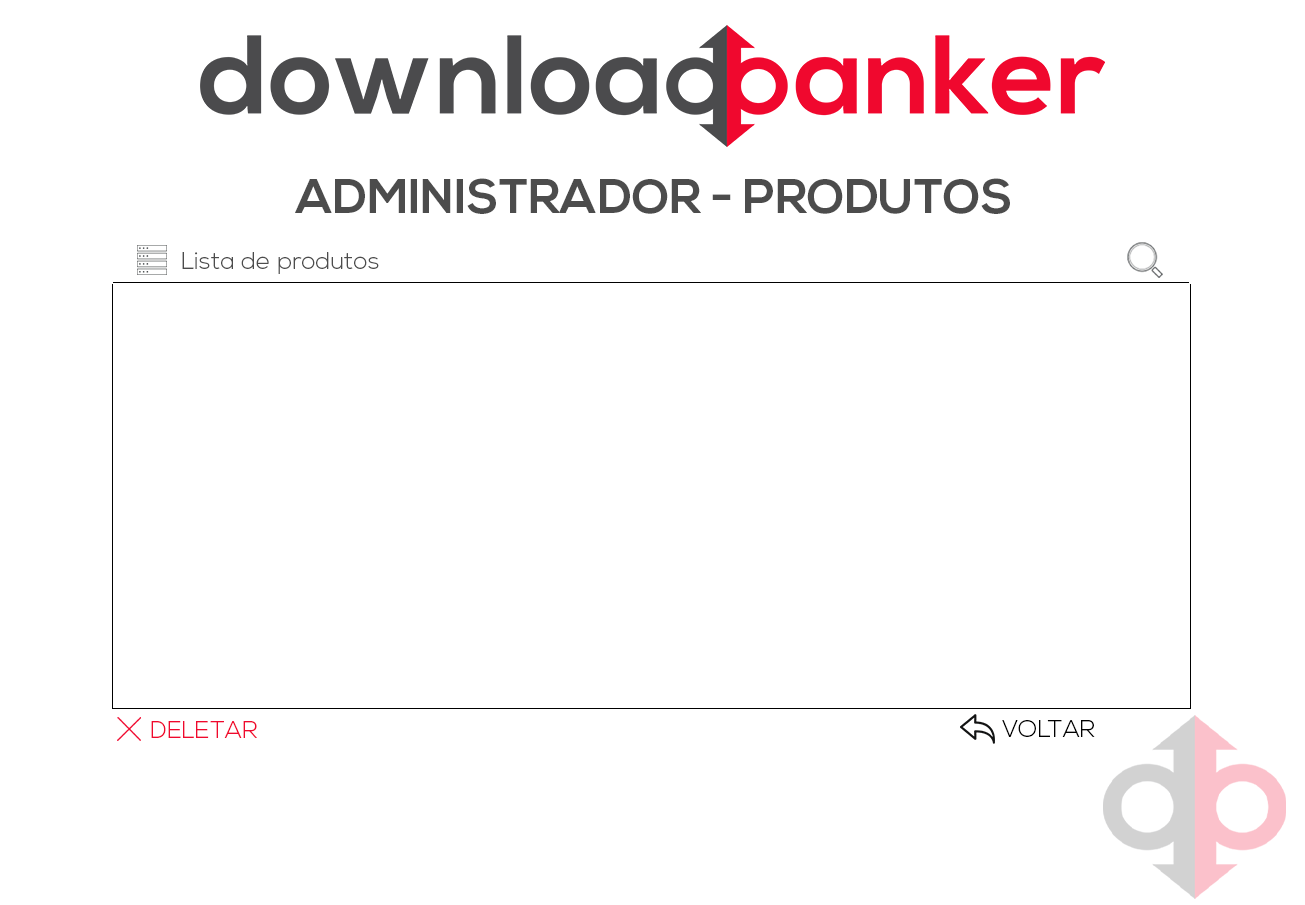
<style>
.page{position:relative;width:1305px;height:905px;background:#ffffff}
.page>*{position:absolute;margin:0}
.t1{font:48px "NexaBold";color:#4c4c4c}
.t2{font:24px "NexaLight";color:#4c4c4c}
.t3{font:24px "NexaLight";color:#f0082e}
.t4{font:24px "NexaLight";color:#000000}
</style>
<div class="page">
<p class="t1" style="left:295px;top:178px;width:715px;height:36px">ADMINISTRADOR - PRODUTOS</p>
<p class="t2" style="left:182px;top:252px;width:197px;height:22px">Lista de produtos</p>
<p class="t3" style="left:151px;top:721px;width:106px;height:17px">DELETAR</p>
<p class="t4" style="left:1002px;top:720px;width:93px;height:17px">VOLTAR</p>
</div>
